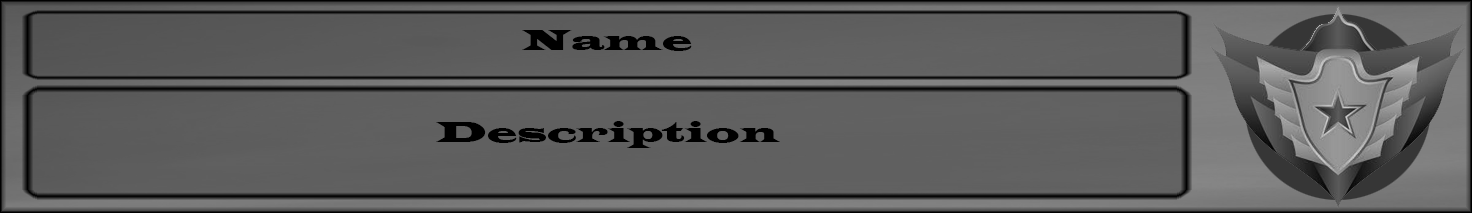
<style>
.page{position:relative;width:1472px;height:213px}
.page>*{position:absolute;margin:0}
.t1{font:30px "LatinWide";color:#000000;scale:1.14 1}
</style>
<div class="page">
<p class="t1" style="left:522px;top:30px;width:170px;height:21px">Name</p>
<p class="t1" style="left:436px;top:121px;width:344px;height:27px">Description</p>
</div>
